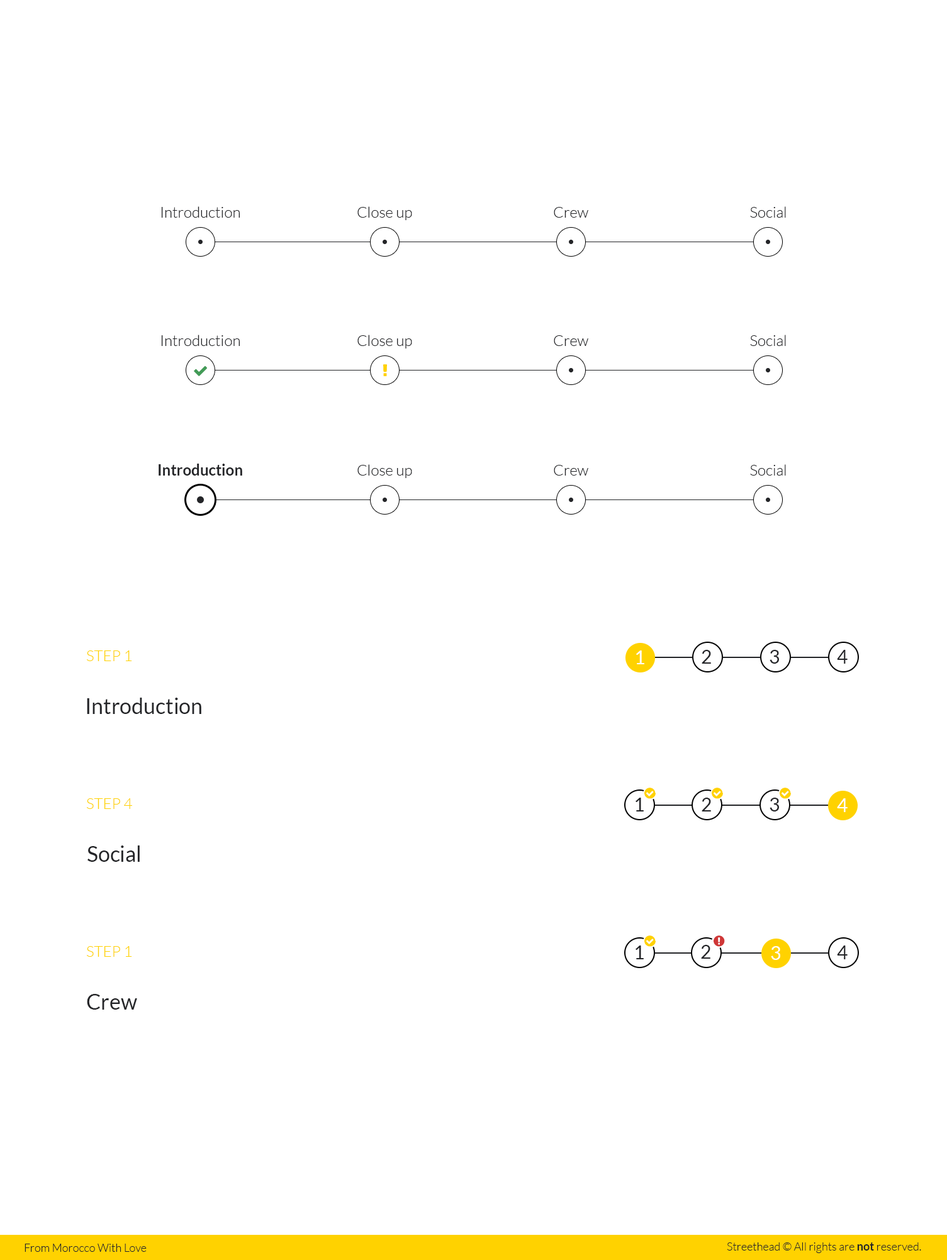
<style>
.page{position:relative;width:947px;height:1260px;background:#ffffff}
.page>*{position:absolute;margin:0}
.t1{font:15.1px "Lato-Light";color:#242528}
.t2{font:15.1px "Lato-Bold";color:#242528}
.t3{font:15.1px "Lato-Light";color:#ffd200}
.t4{font:18.9px "Lato-Regular";color:#ffffff}
.t5{font:18.9px "Lato-Regular";color:#242528}
.t6{font:21.4px "Lato-Regular";color:#242528}
.t7{font:11.3px "Lato-Light";color:#242528}
.t8{font:11.3px "Lato-Bold";color:#242528}
</style>
<div class="page">
<p class="t1" style="left:161px;top:206px;width:79px;height:12px">Introduction</p>
<p class="t1" style="left:357px;top:206px;width:55px;height:14px">Close up</p>
<p class="t1" style="left:553px;top:207px;width:35px;height:11px">Crew</p>
<p class="t1" style="left:750px;top:206px;width:36px;height:12px">Social</p>
<p class="t1" style="left:161px;top:335px;width:79px;height:11px">Introduction</p>
<p class="t1" style="left:357px;top:335px;width:55px;height:13px">Close up</p>
<p class="t1" style="left:553px;top:335px;width:35px;height:11px">Crew</p>
<p class="t1" style="left:750px;top:335px;width:36px;height:11px">Social</p>
<p class="t2" style="left:158px;top:464px;width:84px;height:11px">Introduction</p>
<p class="t1" style="left:357px;top:464px;width:55px;height:14px">Close up</p>
<p class="t1" style="left:553px;top:465px;width:35px;height:10px">Crew</p>
<p class="t1" style="left:750px;top:464px;width:36px;height:11px">Social</p>
<p class="t3" style="left:86px;top:650px;width:46px;height:11px">STEP 1</p>
<p class="t4" style="left:636px;top:650px;width:8px;height:14px">1</p>
<p class="t5" style="left:701px;top:650px;width:10px;height:14px">2</p>
<p class="t5" style="left:769px;top:650px;width:10px;height:14px">3</p>
<p class="t5" style="left:836px;top:650px;width:11px;height:14px">4</p>
<p class="t6" style="left:87px;top:697px;width:114px;height:17px">Introduction</p>
<p class="t5" style="left:635px;top:797px;width:8px;height:14px">1</p>
<p class="t5" style="left:701px;top:797px;width:10px;height:14px">2</p>
<p class="t5" style="left:769px;top:797px;width:10px;height:14px">3</p>
<p class="t3" style="left:86px;top:798px;width:46px;height:11px">STEP 4</p>
<p class="t4" style="left:836px;top:798px;width:11px;height:14px">4</p>
<p class="t6" style="left:87px;top:845px;width:53px;height:17px">Social</p>
<p class="t3" style="left:86px;top:946px;width:46px;height:11px">STEP 1</p>
<p class="t5" style="left:635px;top:945px;width:8px;height:14px">1</p>
<p class="t5" style="left:701px;top:945px;width:9px;height:14px">2</p>
<p class="t4" style="left:770px;top:946px;width:10px;height:14px">3</p>
<p class="t5" style="left:836px;top:945px;width:11px;height:14px">4</p>
<p class="t6" style="left:87px;top:994px;width:50px;height:15px">Crew</p>
<p class="t7" style="left:25px;top:1243px;width:122px;height:9px">From Morocco With Love</p>
<p class="t7" style="left:726px;top:1242px;width:195px;height:11px">Streethead © All rights are <span class="t8">not </span>reserved.</p>
</div>
